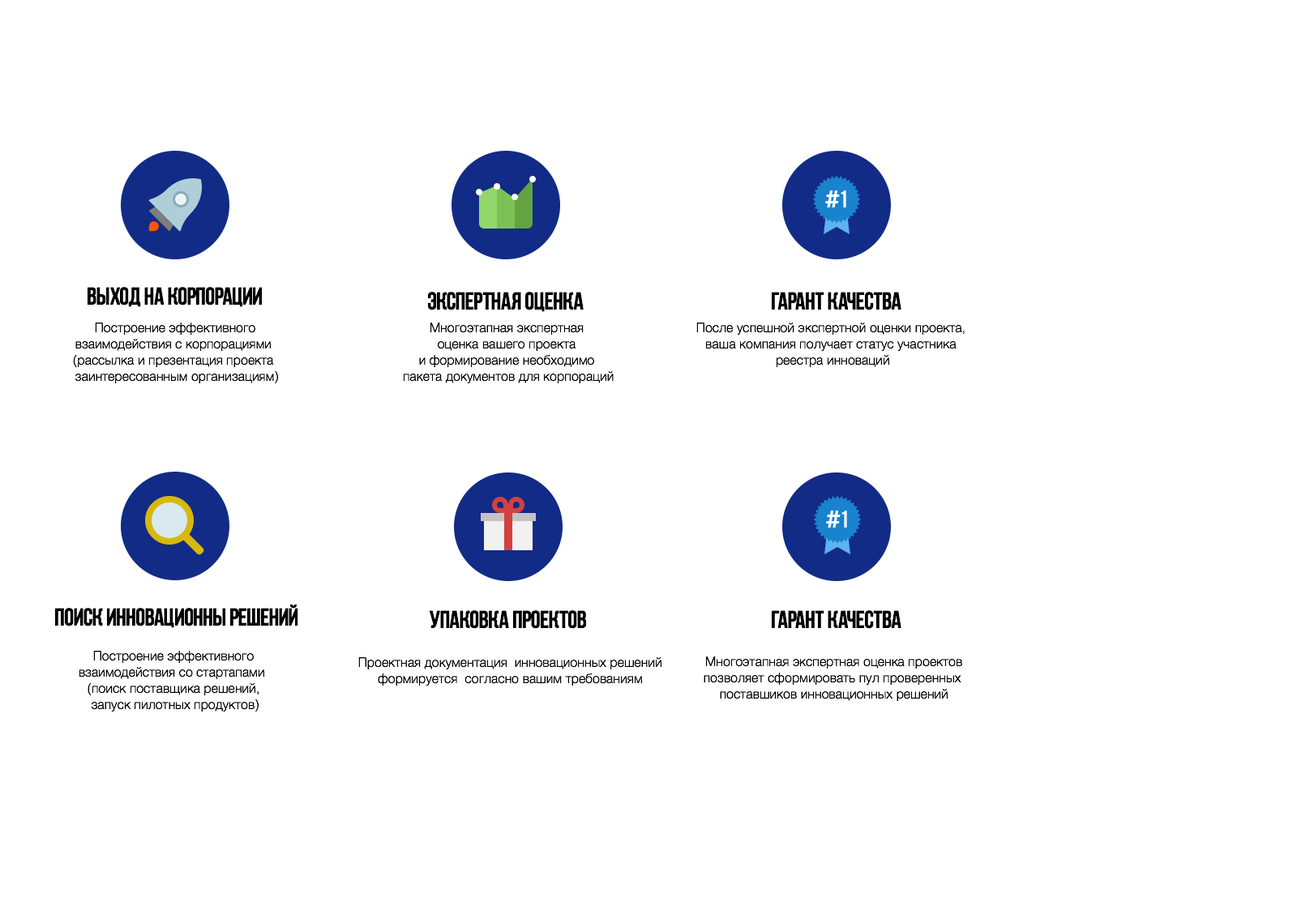
<style>
.page{position:relative;width:1297px;height:919px;background:#ffffff}
.page>*{position:absolute;margin:0}
.t1{font:24.3px "WiGuru-1";color:#000000}
.t2{font:13px/16.2px "Helvetica-Light";color:#000000}
</style>
<div class="page">
<p class="t1" style="left:87px;top:287px;width:176px;height:20px">Выход на корпорации</p>
<p class="t1" style="left:427px;top:292px;width:157px;height:20px">экспертная оценка</p>
<p class="t1" style="left:771px;top:292px;width:130px;height:18px">гарант качества</p>
<p class="t2" style="left:73px;top:323px;width:205px;height:61px;text-align:center">Построение эффективного <br>взаимодействия с корпорациями  <br>(рассылка и презентация проекта  <br>заинтересованным организациям)</p>
<p class="t2" style="left:403px;top:323px;width:211px;height:60px;text-align:center">Многоэтапная экспертная <br>оценка вашего проекта <br>и формирование необходимо <br>пакета документов для корпораций</p>
<p class="t2" style="left:696px;top:323px;width:269px;height:44px;text-align:center">После успешной экспертной оценки проекта, <br>ваша компания получает статус участника <br>реестра инноваций</p>
<p class="t1" style="left:54px;top:605px;width:244px;height:23px">Поиск инновационны решений</p>
<p class="t1" style="left:429px;top:610px;width:158px;height:19px">упаковка проектов</p>
<p class="t1" style="left:771px;top:610px;width:130px;height:19px">гарант качества</p>
<p class="t2" style="left:79px;top:651px;width:185px;height:62px;text-align:center">Построение эффективного <br>взаимодействия со стартапами  <br>(поиск поставщика решений, <br>запуск пилотных продуктов)</p>
<p class="t2" style="left:358px;top:657px;width:304px;height:29px;text-align:center">Проектная документация  инновационных решений<br>формируется  согласно вашим требованиям</p>
<p class="t2" style="left:704px;top:657px;width:258px;height:44px;text-align:center">Многоэтапная экспертная оценка проектов<br>позволяет сформировать пул проверенных <br>поставшиков инновационных решений</p>
</div>
